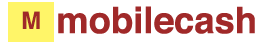
<style>
.page{position:relative;width:260px;height:44px;background:#ffffff}
.page>*{position:absolute;margin:0}
.t1{font:36.6px "Helvetica-Bold";letter-spacing:0.001em;color:#a02929}
.t2{font:24.2px "Helvetica-Bold";letter-spacing:0.001em;color:#a02929}
</style>
<div class="page">
<p class="t1" style="left:58px;top:6px;width:197px;height:28px">mobilecash</p>
<p class="t2" style="left:22px;top:11px;width:18px;height:18px">M</p>
</div>
